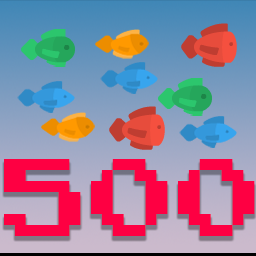
<style>
.page{position:relative;width:256px;height:256px}
.page>*{position:absolute;margin:0}
.t1{font:87.2px "PressStart2P-Regular";color:#fe0042}
</style>
<div class="page">
<p class="t1" style="left:4px;top:159px;width:251px;height:77px">500</p>
</div>
